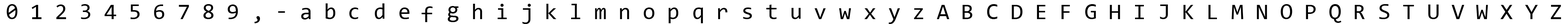
<style>
.page{position:relative;width:1568px;height:24px;background:#ffffff}
.page>*{position:absolute;margin:0}
.t1{font:23px "Consolas";color:#000000}
</style>
<div class="page">
<p class="t1" style="left:7px;top:4px;width:11px;height:16px">0</p>
<p class="t1" style="left:32px;top:5px;width:10px;height:15px">1</p>
<p class="t1" style="left:56px;top:5px;width:10px;height:15px">2</p>
<p class="t1" style="left:81px;top:4px;width:9px;height:16px">3</p>
<p class="t1" style="left:105px;top:5px;width:11px;height:15px">4</p>
<p class="t1" style="left:131px;top:5px;width:9px;height:15px">5</p>
<p class="t1" style="left:154px;top:5px;width:10px;height:15px">6</p>
<p class="t1" style="left:179px;top:5px;width:10px;height:15px">7</p>
<p class="t1" style="left:203px;top:4px;width:11px;height:16px">8</p>
<p class="t1" style="left:227px;top:5px;width:11px;height:15px">9</p>
<p class="t1" style="left:325px;top:3px;width:10px;height:17px">b</p>
<p class="t1" style="left:375px;top:3px;width:10px;height:17px">d</p>
<p class="t1" style="left:473px;top:4px;width:9px;height:16px">h</p>
<p class="t1" style="left:498px;top:4px;width:9px;height:16px">i</p>
<p class="t1" style="left:522px;top:4px;width:9px;height:20px">j</p>
<p class="t1" style="left:546px;top:4px;width:10px;height:16px">k</p>
<p class="t1" style="left:571px;top:4px;width:9px;height:16px">l</p>
<p class="t1" style="left:766px;top:5px;width:11px;height:15px">t</p>
<p class="t1" style="left:937px;top:5px;width:12px;height:15px">A</p>
<p class="t1" style="left:962px;top:5px;width:10px;height:15px">B</p>
<p class="t1" style="left:987px;top:4px;width:11px;height:16px">C</p>
<p class="t1" style="left:1012px;top:5px;width:10px;height:15px">D</p>
<p class="t1" style="left:1037px;top:5px;width:8px;height:15px">E</p>
<p class="t1" style="left:1062px;top:5px;width:8px;height:15px">F</p>
<p class="t1" style="left:1085px;top:4px;width:11px;height:16px">G</p>
<p class="t1" style="left:1110px;top:5px;width:10px;height:15px">H</p>
<p class="t1" style="left:1135px;top:5px;width:9px;height:15px">I</p>
<p class="t1" style="left:1160px;top:5px;width:8px;height:15px">J</p>
<p class="t1" style="left:1183px;top:5px;width:11px;height:15px">K</p>
<p class="t1" style="left:1208px;top:5px;width:9px;height:15px">L</p>
<p class="t1" style="left:1232px;top:5px;width:11px;height:15px">M</p>
<p class="t1" style="left:1257px;top:5px;width:10px;height:15px">N</p>
<p class="t1" style="left:1281px;top:4px;width:11px;height:16px">O</p>
<p class="t1" style="left:1306px;top:5px;width:10px;height:15px">P</p>
<p class="t1" style="left:1329px;top:4px;width:12px;height:19px">Q</p>
<p class="t1" style="left:1355px;top:5px;width:10px;height:15px">R</p>
<p class="t1" style="left:1379px;top:4px;width:11px;height:16px">S</p>
<p class="t1" style="left:1403px;top:5px;width:11px;height:15px">T</p>
<p class="t1" style="left:1428px;top:5px;width:11px;height:15px">U</p>
<p class="t1" style="left:1452px;top:5px;width:12px;height:15px">V</p>
<p class="t1" style="left:1476px;top:5px;width:12px;height:15px">W</p>
<p class="t1" style="left:1500px;top:5px;width:13px;height:15px">X</p>
<p class="t1" style="left:1525px;top:5px;width:13px;height:15px">Y</p>
<p class="t1" style="left:1551px;top:5px;width:10px;height:15px">Z</p>
<p class="t1" style="left:255px;top:16px;width:5px;height:8px">,</p>
<p class="t1" style="left:278px;top:11px;width:7px;height:2px">-</p>
<p class="t1" style="left:301px;top:8px;width:10px;height:12px">a</p>
<p class="t1" style="left:349px;top:8px;width:9px;height:12px">c</p>
<p class="t1" style="left:399px;top:8px;width:11px;height:12px">e</p>
<p class="t1" style="left:421px;top:7px;width:12px;height:16px">f</p>
<p class="t1" style="left:448px;top:6px;width:11px;height:17px">g</p>
<p class="t1" style="left:595px;top:8px;width:11px;height:12px">m</p>
<p class="t1" style="left:620px;top:8px;width:9px;height:12px">n</p>
<p class="t1" style="left:644px;top:8px;width:11px;height:12px">o</p>
<p class="t1" style="left:668px;top:8px;width:10px;height:16px">p</p>
<p class="t1" style="left:693px;top:8px;width:10px;height:16px">q</p>
<p class="t1" style="left:718px;top:8px;width:9px;height:12px">r</p>
<p class="t1" style="left:743px;top:8px;width:9px;height:12px">s</p>
<p class="t1" style="left:791px;top:8px;width:10px;height:12px">u</p>
<p class="t1" style="left:815px;top:8px;width:11px;height:12px">v</p>
<p class="t1" style="left:839px;top:8px;width:12px;height:12px">w</p>
<p class="t1" style="left:864px;top:8px;width:11px;height:12px">x</p>
<p class="t1" style="left:889px;top:8px;width:11px;height:16px">y</p>
<p class="t1" style="left:914px;top:8px;width:9px;height:12px">z</p>
</div>
